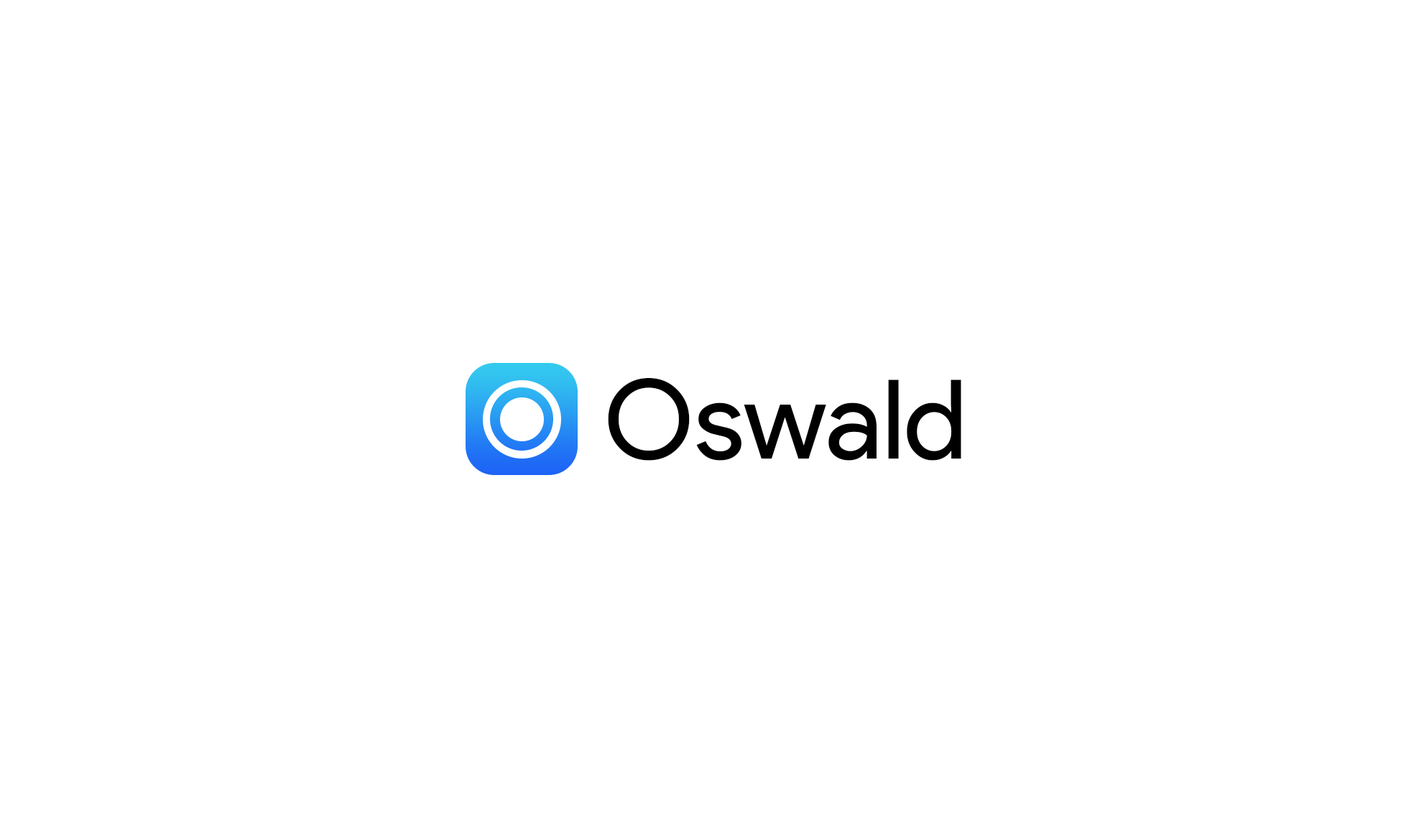
<style>
.page{position:relative;width:1424px;height:838px;background:#ffffff}
.page>*{position:absolute;margin:0}
.t1{font:110.1px "ProductSans-Regular";color:#000000}
</style>
<div class="page">
<p class="t1" style="left:608px;top:378px;width:353px;height:82px">Oswald</p>
</div>
